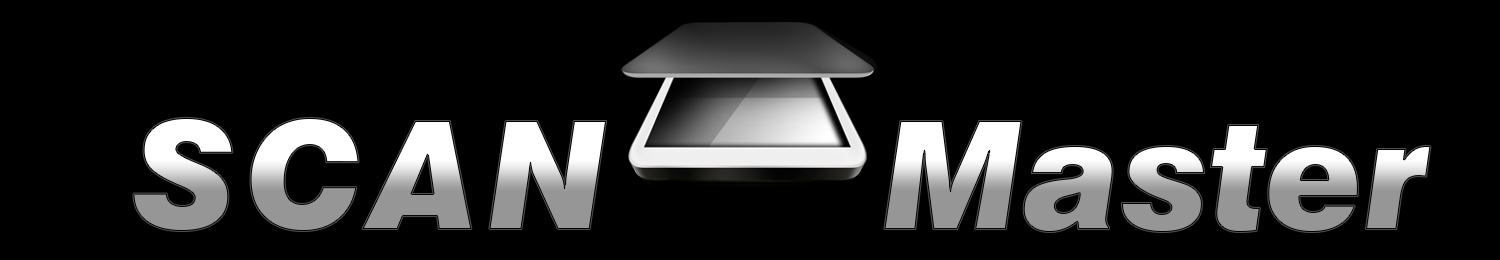
<style>
.page{position:relative;width:1500px;height:260px;background:#000000}
.page>*{position:absolute;margin:0}
.t1{font:150px "Swiss721BT-BlackItalic"}
</style>
<div class="page">
<p class="t1" style="left:133px;top:118px;width:1298px;height:114px">S  C   A   N                                         Master</p>
</div>
